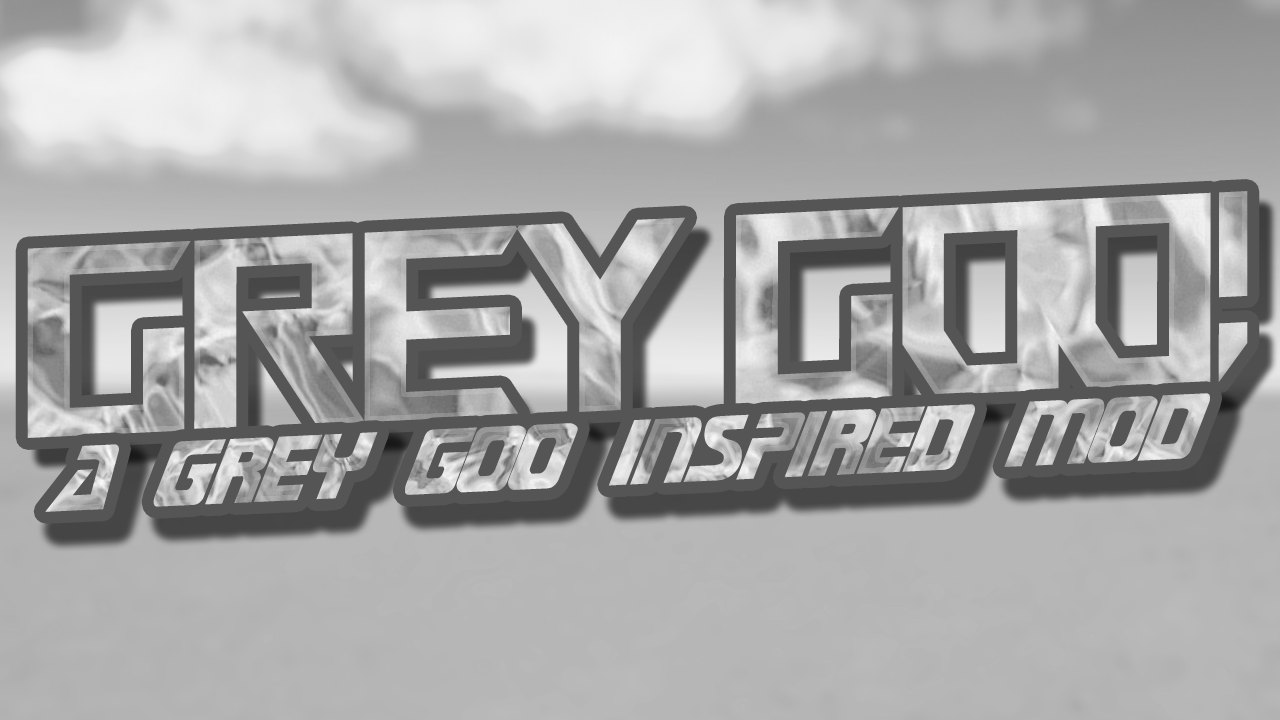
<style>
.page{position:relative;width:1280px;height:720px}
.page>*{position:absolute;margin:0}
.t1{font:270.1px "ROGFonts-Regular";letter-spacing:-0.04em;scale:0.73 1}
.t2{font:270.1px "ROGFonts-Regular";letter-spacing:-0.1em;scale:0.73 1}
.t3{font:107.4px "FederationTNGTitle";letter-spacing:-0.04em}
</style>
<div class="page">
<p class="t1" style="left:27px;top:191px;width:1221px;height:247px;rotate:-3deg">GREY G<span class="t2">OO</span>!</p>
<p class="t3" style="left:45px;top:393px;width:1165px;height:119px;rotate:-3deg">a grey goo inspired mod</p>
</div>
